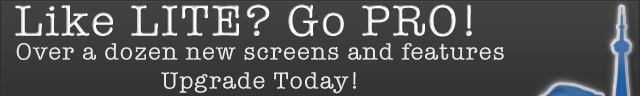
<style>
.page{position:relative;width:640px;height:96px}
.page>*{position:absolute;margin:0}
.t1{font:45px "AmericanTypewriter";letter-spacing:0.05em;color:#ffffff}
.t2{font:24px "AmericanTypewriter";letter-spacing:0.05em;color:#e9e9e9}
</style>
<div class="page">
<p class="t1" style="left:15px;top:4px;width:457px;height:33px">Like LITE? Go PRO!</p>
<p class="t2" style="left:16px;top:43px;width:488px;height:51px;text-align:center">Over a dozen new screens and features<br>Upgrade Today!</p>
</div>
